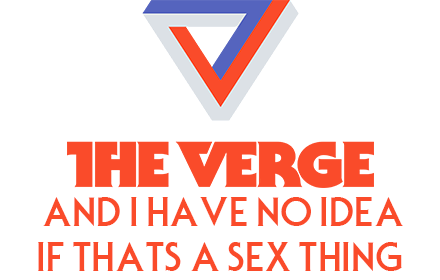
<style>
.page{position:relative;width:440px;height:280px;background:#ffffff}
.page>*{position:absolute;margin:0}
.t1{font:37.5px "SerifGothicBold";color:#fa4b2a}
</style>
<div class="page">
<p class="t1" style="left:38px;top:197px;width:365px;height:74px;text-align:center">AND I HAVE NO IDEA<br>IF THATS A SEX THING</p>
</div>
